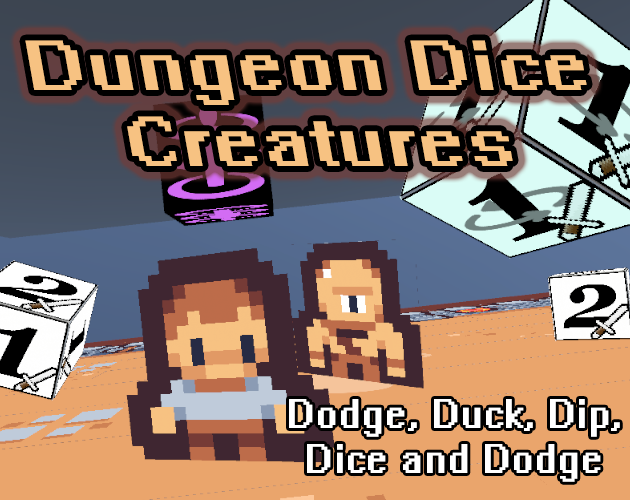
<style>
.page{position:relative;width:630px;height:500px}
.page>*{position:absolute;margin:0}
.t1{font:64.5px "System";color:#f7c282;scale:1.23 1}
.t2{font:37.2px "System";color:#ffffff}
</style>
<div class="page">
<p class="t1" style="left:25px;top:40px;width:562px;height:126px;text-align:center">Dungeon Dice<br>Creatures</p>
<p class="t2" style="left:289px;top:399px;width:331px;height:83px;text-align:center">Dodge, Duck, Dip,<br>Dice and Dodge</p>
</div>
